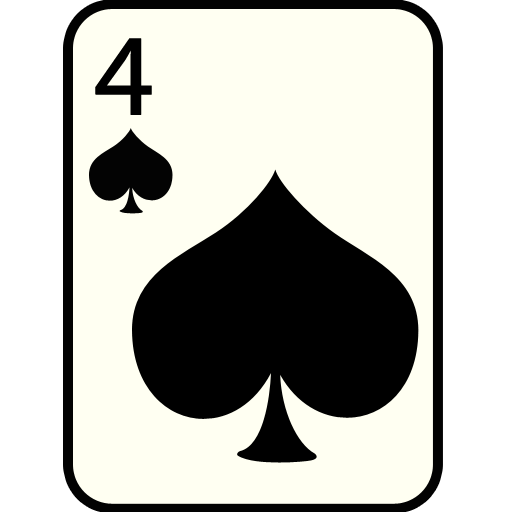
<style>
.page{position:relative;width:512px;height:512px;background:#fffff2}
.page>*{position:absolute;margin:0}
.t1{font:200px "MyriadPro-Regular";letter-spacing:-0.05em;color:#000000;font-variant:small-caps;font-weight:bold}
</style>
<div class="page">
<p class="t1" style="left:95px;top:38px;width:57px;height:77px">4</p>
</div>
